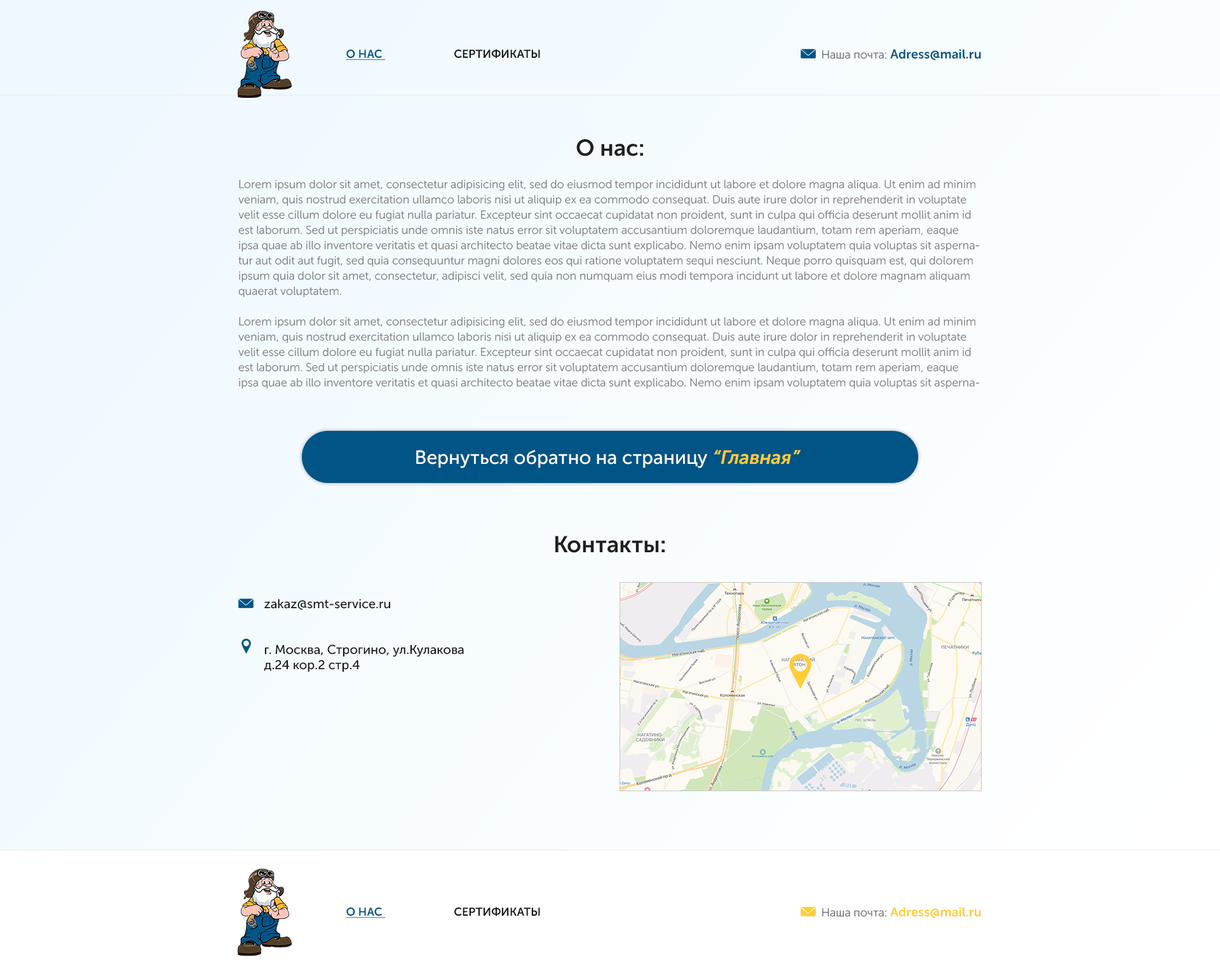
<style>
.page{position:relative;width:1220px;height:978px}
.page>*{position:absolute;margin:0}
.t1{font:11.4px "MuseoSansCyrl-700";color:#191919}
.t2{font:11.4px "MuseoSansCyrl-700";color:#005486;text-decoration:underline}
.t3{font:12.7px "MuseoSansCyrl-700";color:#005486}
.t4{font:11.4px "MuseoSansCyrl-300";color:#696969}
.t5{font:22.9px "MuseoSansCyrl-700";color:#202020}
.t6{font:11.4px/15.2px "MuseoSansCyrl-300";color:#7f7f7f}
.t7{font:19.1px "MuseoSansCyrl-500";color:#ffffff}
.t8{font:19.1px "MuseoSansCyrl-700Italic";color:#ffcd35}
.t9{font:12.7px "MuseoSansCyrl-500";color:#161616}
.t10{font:12.7px/15.2px "MuseoSansCyrl-500";color:#161616}
.t11{font:12.7px "MuseoSansCyrl-700";color:#ffcd35}
</style>
<div class="page">
<p class="t1" style="left:346px;top:49px;width:194px;height:11px"><span class="t2">О НАС </span>                        СЕРТИФИКАТЫ</p>
<p class="t3" style="left:822px;top:49px;width:159px;height:11px"><span class="t4">Наша почта: </span>Adress@mail.ru</p>
<p class="t5" style="left:576px;top:139px;width:67px;height:17px">О нас:</p>
<p class="t6" style="left:238px;top:180px;width:742px;height:209px">Lorem ipsum dolor sit amet, consectetur adipisicing elit, sed do eiusmod tempor incididunt ut labore et dolore magna aliqua. Ut enim ad minim veniam, quis nostrud exercitation ullamco laboris nisi ut aliquip ex ea commodo consequat. Duis aute irure dolor in reprehenderit in voluptate velit esse cillum dolore eu fugiat nulla pariatur. Excepteur sint occaecat cupidatat non proident, sunt in culpa qui officia deserunt mollit anim id est laborum. Sed ut perspiciatis unde omnis iste natus error sit voluptatem accusantium doloremque laudantium, totam rem aperiam, eaque ipsa quae ab illo inventore veritatis et quasi architecto beatae vitae dicta sunt explicabo. Nemo enim ipsam voluptatem quia voluptas sit aspernatur aut odit aut fugit, sed quia consequuntur magni dolores eos qui ratione voluptatem sequi nesciunt. Neque porro quisquam est, qui dolorem ipsum quia dolor sit amet, consectetur, adipisci velit, sed quia non numquam eius modi tempora incidunt ut labore et dolore magnam aliquam quaerat voluptatem.<br><br>Lorem ipsum dolor sit amet, consectetur adipisicing elit, sed do eiusmod tempor incididunt ut labore et dolore magna aliqua. Ut enim ad minim veniam, quis nostrud exercitation ullamco laboris nisi ut aliquip ex ea commodo consequat. Duis aute irure dolor in reprehenderit in voluptate velit esse cillum dolore eu fugiat nulla pariatur. Excepteur sint occaecat cupidatat non proident, sunt in culpa qui officia deserunt mollit anim id est laborum. Sed ut perspiciatis unde omnis iste natus error sit voluptatem accusantium doloremque laudantium, totam rem aperiam, eaque ipsa quae ab illo inventore veritatis et quasi architecto beatae vitae dicta sunt explicabo. Nemo enim ipsam voluptatem quia voluptas sit aspernatur aut odit aut fugit, sed quia consequuntur magni dolores eos qui ratione voluptatem sequi nesciunt. Neque porro quisquam est, qui dolorem ipsum quia dolor sit amet, consectetur, adipisci velit, sed quia non numquam eius modi tempora incidunt ut labore et dolore magnam aliquam quaerat voluptatem.</p>
<p class="t7" style="left:416px;top:450px;width:384px;height:18px">Вернуться обратно на страницу <span class="t8">“Главная”</span></p>
<p class="t5" style="left:555px;top:536px;width:109px;height:17px">Контакты:</p>
<p class="t9" style="left:264px;top:598px;width:127px;height:12px">zakaz@smt-service.ru</p>
<p class="t10" style="left:264px;top:644px;width:200px;height:28px">г. Москва, Строгино, ул.Кулакова <br>д.24 кор.2 стр.4</p>
<p class="t1" style="left:346px;top:907px;width:194px;height:11px"><span class="t2">О НАС </span>                        СЕРТИФИКАТЫ</p>
<p class="t11" style="left:822px;top:907px;width:159px;height:11px"><span class="t4">Наша почта: </span>Adress@mail.ru</p>
</div>
